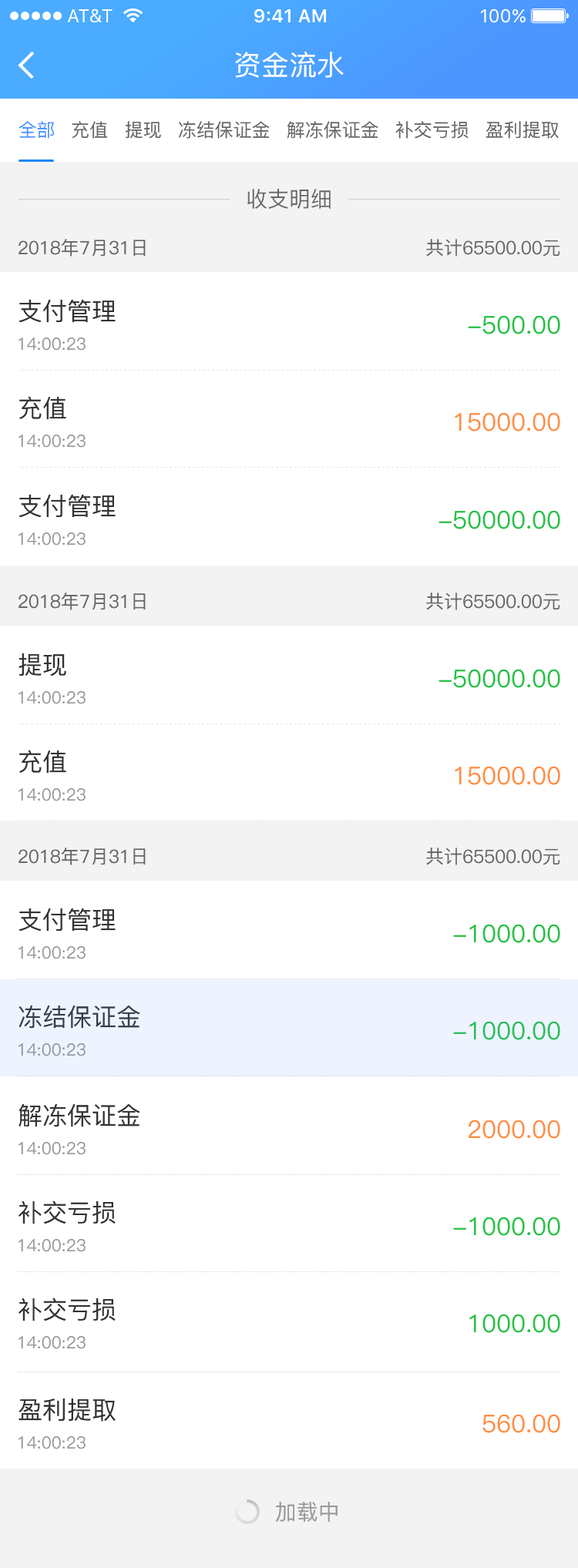
<style>
.page{position:relative;width:578px;height:1568px;background:#ffffff}
.page>*{position:absolute;margin:0}
.t1{font:27.7px "PingFang-SC-Medium";color:#ffffff}
.t2{font:18.5px "PingFang-SC-Medium";color:#4794ff}
.t3{font:18.5px "PingFang-SC-Medium";color:#666666}
.t4{font:21.6px "PingFang-SC-Medium";color:#666666}
.t5{font:24.7px "PingFang-SC-Medium";color:#333333}
.t6{font:24.7px "PingFang-SC-Medium";color:#23c245}
.t7{font:17px "PingFang-SC-Medium";color:#999999}
.t8{font:24.7px "PingFang-SC-Medium";color:#ff8e42}
.t9{font:21.6px "PingFang-SC-Medium";color:#999999}
</style>
<div class="page">
<p class="t1" style="left:235px;top:52px;width:109px;height:26px">资金流水</p>
<p class="t2" style="left:18px;top:121px;width:36px;height:18px">全部</p>
<p class="t3" style="left:72px;top:121px;width:36px;height:18px">充值</p>
<p class="t3" style="left:125px;top:121px;width:36px;height:18px">提现</p>
<p class="t3" style="left:179px;top:121px;width:91px;height:18px">冻结保证金</p>
<p class="t3" style="left:287px;top:121px;width:91px;height:18px">解冻保证金</p>
<p class="t3" style="left:395px;top:121px;width:73px;height:18px">补交亏损</p>
<p class="t3" style="left:485px;top:121px;width:74px;height:18px">盈利提取</p>
<p class="t4" style="left:247px;top:189px;width:84px;height:20px">收支明细</p>
<p class="t3" style="left:18px;top:239px;width:128px;height:18px">2018年7月31日</p>
<p class="t3" style="left:426px;top:239px;width:134px;height:18px">共计65500.00元</p>
<p class="t5" style="left:18px;top:299px;width:98px;height:24px">支付管理</p>
<p class="t6" style="left:468px;top:315px;width:92px;height:19px">-500.00</p>
<p class="t7" style="left:18px;top:337px;width:68px;height:14px">14:00:23</p>
<p class="t5" style="left:19px;top:396px;width:47px;height:24px">充值</p>
<p class="t8" style="left:455px;top:412px;width:105px;height:19px">15000.00</p>
<p class="t7" style="left:18px;top:435px;width:68px;height:13px">14:00:23</p>
<p class="t5" style="left:18px;top:494px;width:98px;height:24px">支付管理</p>
<p class="t6" style="left:438px;top:510px;width:122px;height:19px">-50000.00</p>
<p class="t7" style="left:18px;top:532px;width:68px;height:14px">14:00:23</p>
<p class="t3" style="left:18px;top:593px;width:128px;height:17px">2018年7月31日</p>
<p class="t3" style="left:426px;top:593px;width:134px;height:17px">共计65500.00元</p>
<p class="t5" style="left:18px;top:653px;width:48px;height:24px">提现</p>
<p class="t6" style="left:438px;top:669px;width:122px;height:19px">-50000.00</p>
<p class="t7" style="left:18px;top:691px;width:68px;height:13px">14:00:23</p>
<p class="t5" style="left:19px;top:750px;width:47px;height:24px">充值</p>
<p class="t8" style="left:455px;top:766px;width:105px;height:19px">15000.00</p>
<p class="t7" style="left:18px;top:788px;width:68px;height:13px">14:00:23</p>
<p class="t3" style="left:18px;top:848px;width:128px;height:17px">2018年7月31日</p>
<p class="t3" style="left:426px;top:848px;width:134px;height:17px">共计65500.00元</p>
<p class="t5" style="left:18px;top:908px;width:98px;height:24px">支付管理</p>
<p class="t6" style="left:453px;top:924px;width:107px;height:19px">-1000.00</p>
<p class="t7" style="left:18px;top:946px;width:68px;height:13px">14:00:23</p>
<p class="t5" style="left:18px;top:1005px;width:122px;height:24px">冻结保证金</p>
<p class="t6" style="left:453px;top:1021px;width:107px;height:19px">-1000.00</p>
<p class="t7" style="left:18px;top:1043px;width:68px;height:13px">14:00:23</p>
<p class="t5" style="left:18px;top:1103px;width:122px;height:24px">解冻保证金</p>
<p class="t8" style="left:468px;top:1120px;width:92px;height:19px">2000.00</p>
<p class="t7" style="left:18px;top:1142px;width:68px;height:13px">14:00:23</p>
<p class="t5" style="left:18px;top:1200px;width:98px;height:24px">补交亏损</p>
<p class="t6" style="left:453px;top:1217px;width:107px;height:19px">-1000.00</p>
<p class="t7" style="left:18px;top:1239px;width:68px;height:13px">14:00:23</p>
<p class="t5" style="left:18px;top:1298px;width:98px;height:23px">补交亏损</p>
<p class="t6" style="left:469px;top:1314px;width:91px;height:19px">1000.00</p>
<p class="t7" style="left:18px;top:1336px;width:68px;height:13px">14:00:23</p>
<p class="t5" style="left:18px;top:1398px;width:98px;height:24px">盈利提取</p>
<p class="t8" style="left:482px;top:1414px;width:78px;height:19px">560.00</p>
<p class="t7" style="left:18px;top:1436px;width:68px;height:13px">14:00:23</p>
<p class="t9" style="left:275px;top:1502px;width:62px;height:20px">加载中</p>
</div>
